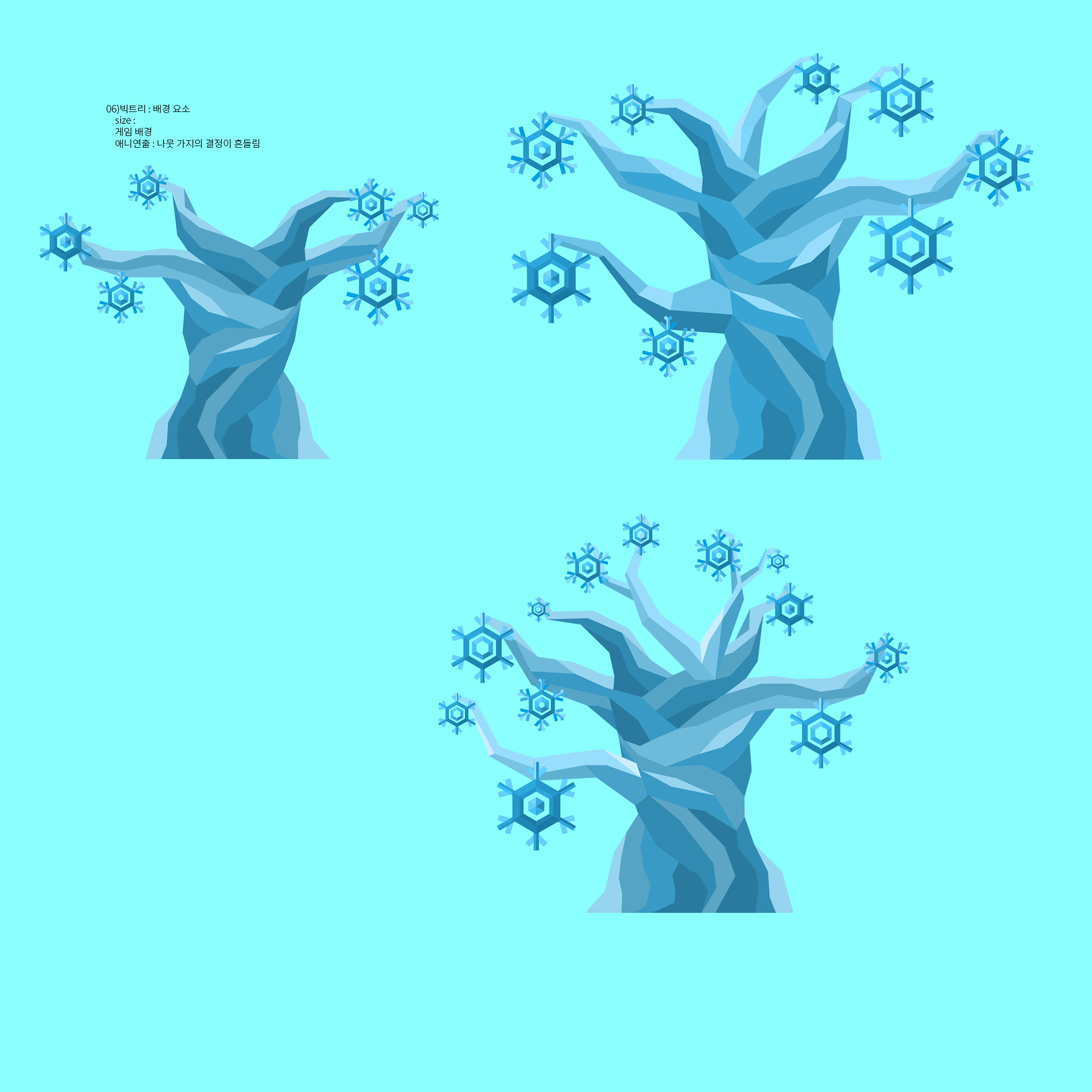
<style>
.page{position:relative;width:1092px;height:1092px;background:#8afffd}
.page>*{position:absolute;margin:0}
.t1{font:9.6px "NotoSansCJKkr-Light";color:#000000}
</style>
<div class="page">
<p class="t1" style="left:107px;top:104px;width:152px;height:44px">06)빅트리 : 배경 요소 <br>    size : <br>    게임 배경<br>    애니연출 : 나뭇 가지의 결정이 흔들림</p>
</div>
